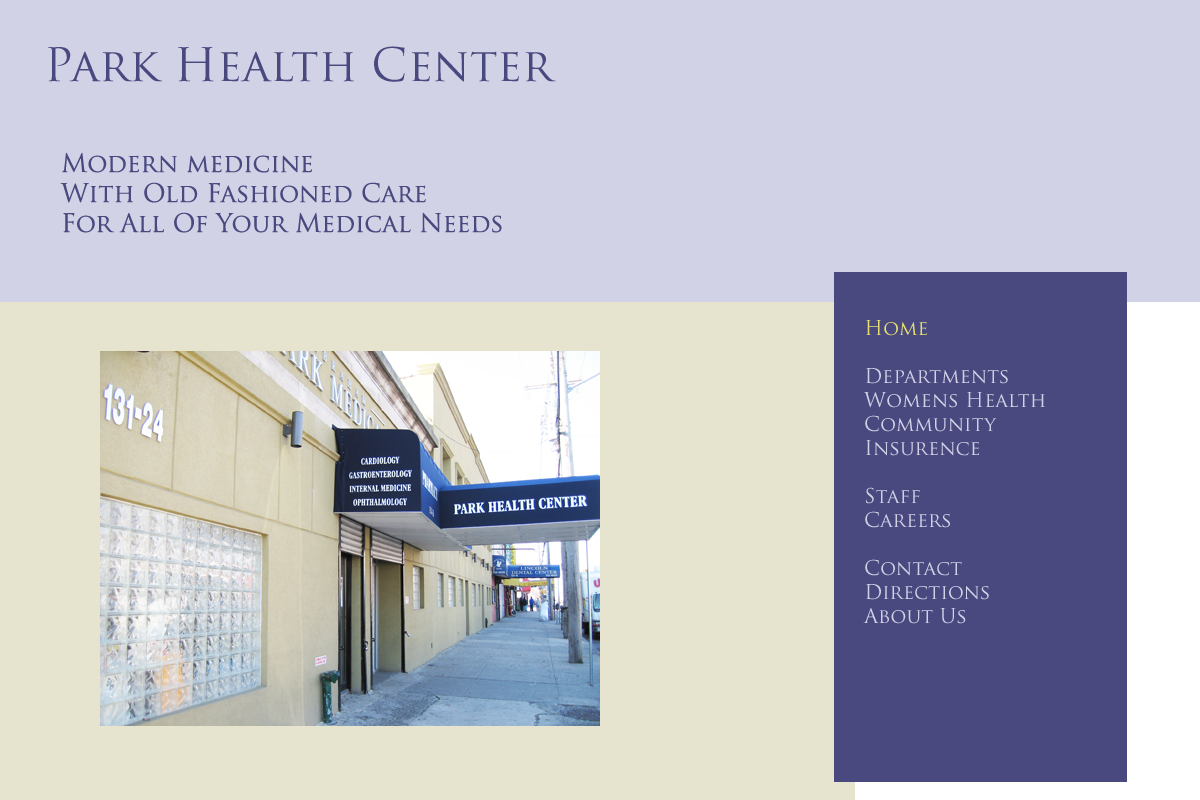
<style>
.page{position:relative;width:1200px;height:800px;background:#d2d2e6}
.page>*{position:absolute;margin:0}
.t1{font:45px "TrajanPro-Regular";color:#494980}
.t2{font:25px "TrajanPro-Regular";color:#494980}
.t3{font:20px "TrajanPro-Regular";color:#d2d2e6}
.t4{font:20px "TrajanPro-Regular";color:#e6e073}
</style>
<div class="page">
<p class="t1" style="left:48px;top:46px;width:508px;height:36px">Park Health Center</p>
<p class="t2" style="left:60px;top:152px;width:442px;height:81px">Modern medicine<br>With Old Fashioned Care<br>For All Of Your Medical Needs</p>
<p class="t3" style="left:863px;top:320px;width:182px;height:304px"><span class="t4">Home<br></span><br>Departments<br>Womens Health<br>Community<br>Insurence<br><br>Staff<br>Careers<br><br>Contact<br>Directions<br>About Us</p>
</div>
